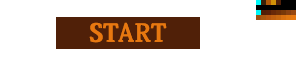
<style>
.page{position:relative;width:296px;height:65px;background:#ffffff}
.page>*{position:absolute;margin:0}
.t1{font:24px "KozMinPro-Medium";letter-spacing:0.025em;color:#e87810;text-transform:uppercase;font-weight:bold}
</style>
<div class="page">
<p class="t1" style="left:89px;top:22px;width:78px;height:21px">START</p>
</div>
